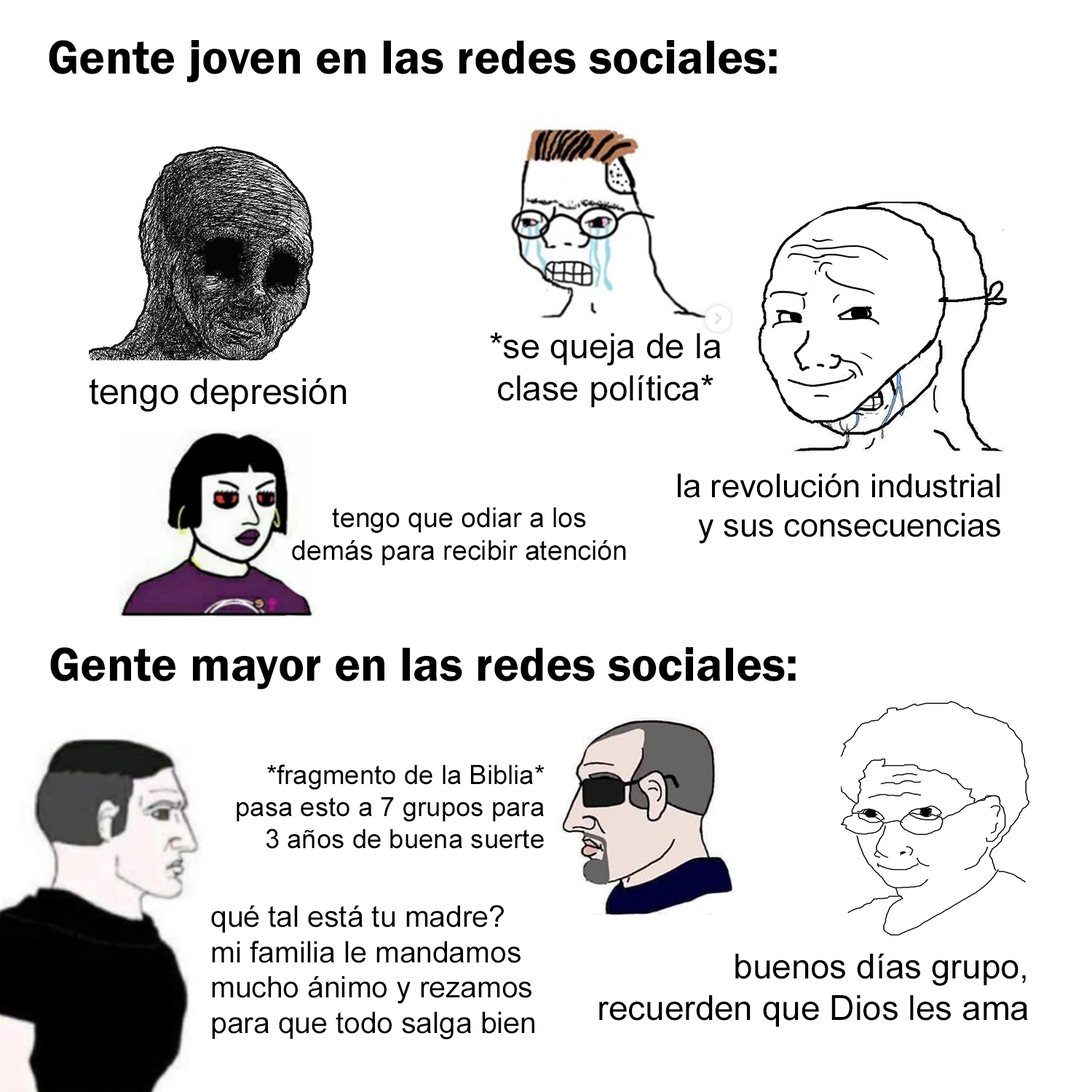
<style>
.page{position:relative;width:1092px;height:1092px;background:#ffffff}
.page>*{position:absolute;margin:0}
.t1{font:49.4px "FranklinGothic-Demi";color:#000000}
.t2{font:35.2px "ArialMT";color:#000000}
.t3{font:36.2px "ArialMT";color:#000000}
.t4{font:33px "ArialMT";color:#000000}
.t5{font:27.2px "ArialMT";color:#000000}
.t6{font:26.6px "ArialMT";color:#000000}
.t7{font:29.6px "ArialMT";color:#000000}
.t8{font:34.5px "ArialMT";color:#000000}
</style>
<div class="page">
<p class="t1" style="left:49px;top:40px;width:728px;height:42px">Gente joven en las redes sociales:</p>
<p class="t2" style="left:490px;top:332px;width:231px;height:76px;text-align:center">*se queja de la<br>clase política*</p>
<p class="t3" style="left:89px;top:378px;width:258px;height:34px">tengo depresión</p>
<p class="t4" style="left:678px;top:473px;width:322px;height:71px;text-align:right">la revolución industrial<br>y sus consecuencias</p>
<p class="t5" style="left:292px;top:507px;width:334px;height:59px;text-align:center">tengo que odiar a los<br>demás para recibir atención</p>
<p class="t1" style="left:50px;top:647px;width:746px;height:42px">Gente mayor en las redes sociales:</p>
<p class="t6" style="left:237px;top:764px;width:308px;height:85px;text-align:right">*fragmento de la Biblia*<br>pasa esto a 7 grupos para<br>3 años de buena suerte</p>
<p class="t7" style="left:211px;top:905px;width:323px;height:135px">qué tal está tu madre?<br>mi familia le mandamos<br>mucho ánimo y rezamos<br>para que todo salga bien</p>
<p class="t8" style="left:599px;top:953px;width:429px;height:74px;text-align:right">buenos días grupo,<br>recuerden que Dios les ama</p>
</div>
